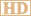
<style>
.page{position:relative;width:31px;height:16px;background:#deb887}
.page>*{position:absolute;margin:0}
.t1{font:17.1px "TimesNewRomanPS-BoldMT";color:#deb887}
</style>
<div class="page">
<p class="t1" style="left:3px;top:2px;width:25px;height:12px">HD</p>
<p class="t1" style="left:3px;top:2px;width:25px;height:13px">HD</p>
</div>
